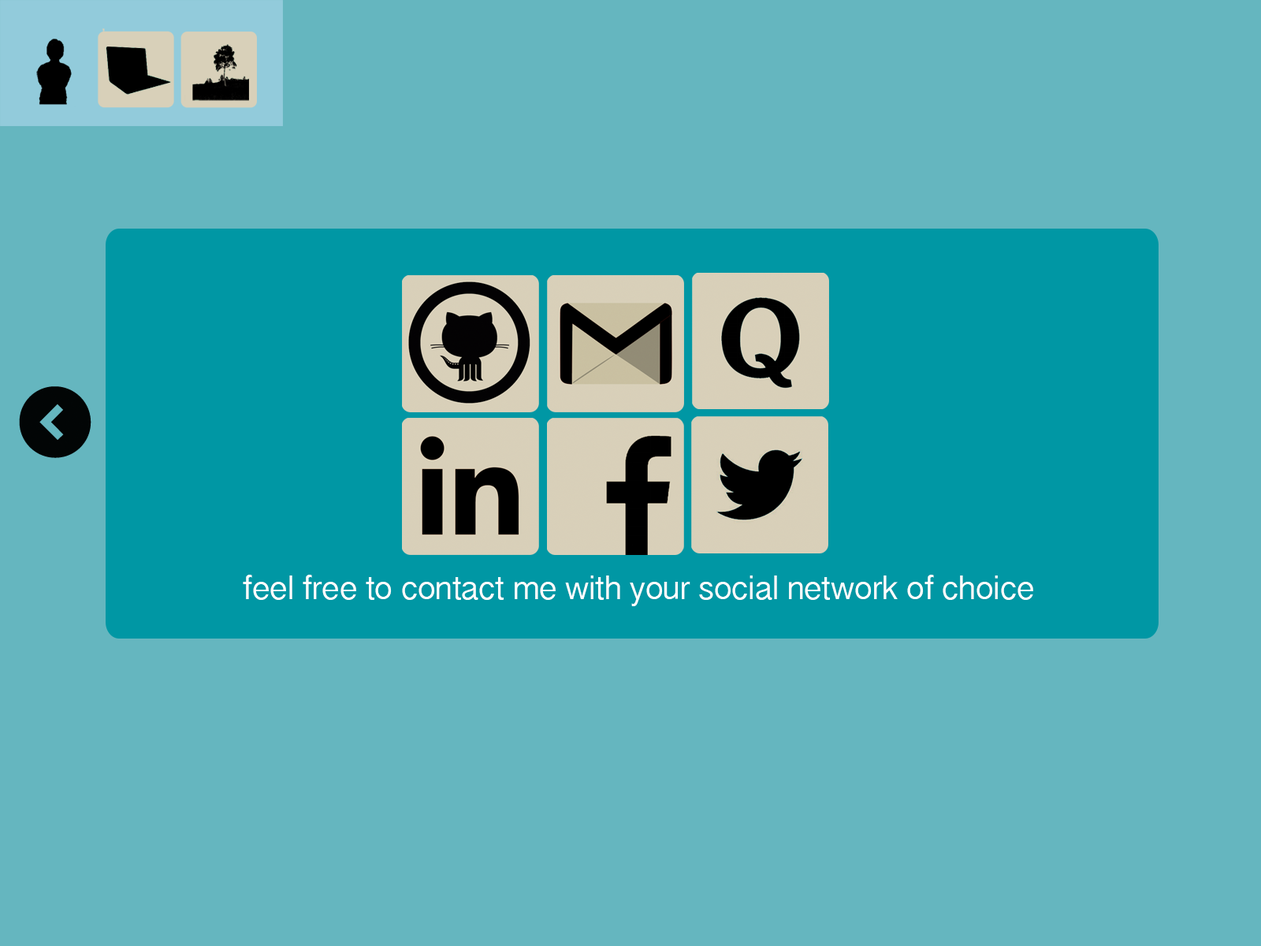
<style>
.page{position:relative;width:1261px;height:946px;background:#65b6bf}
.page>*{position:absolute;margin:0}
.t1{font:31.5px "KannadaSangamMN";color:#ffffff}
</style>
<div class="page">
<p class="t1" style="left:243px;top:575px;width:790px;height:31px">feel free to contact me with your social network of choice</p>
</div>
